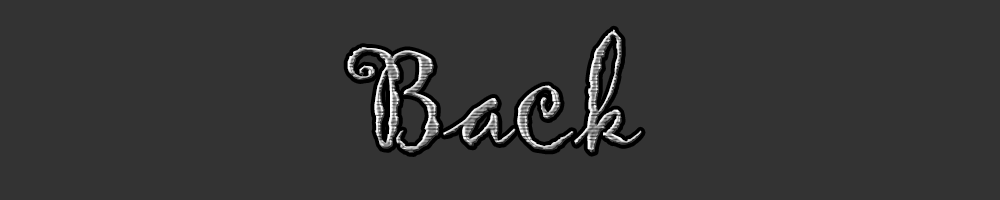
<style>
.page{position:relative;width:1000px;height:200px;background:#333333}
.page>*{position:absolute;margin:0}
.t1{font:148.2px "Gigi-Regular"}
</style>
<div class="page">
<p class="t1" style="left:347px;top:29px;width:295px;height:124px">Back</p>
</div>
